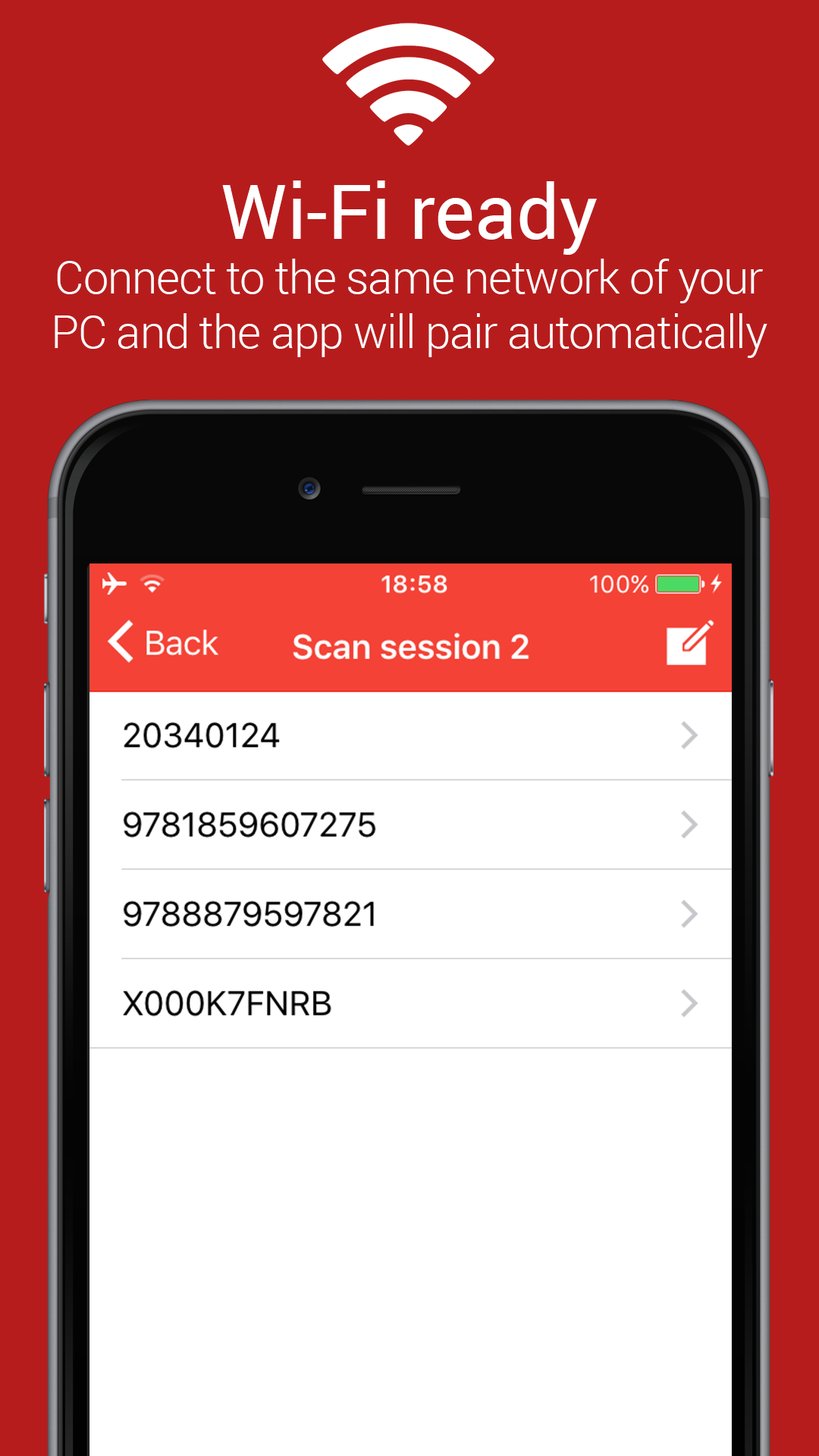
<style>
.page{position:relative;width:819px;height:1456px;background:#ffffff}
.page>*{position:absolute;margin:0}
.t1{font:45.5px "Roboto-Light";letter-spacing:-0.02em;color:#ffffff}
.t2{font:75.7px "Roboto-Regular";color:#ffffff}
</style>
<div class="page">
<p class="t1" style="left:55px;top:180px;width:712px;height:178px;text-align:center"><span class="t2">Wi-Fi ready<br></span>Connect to the same network of your PC and the app will pair automatically</p>
</div>
